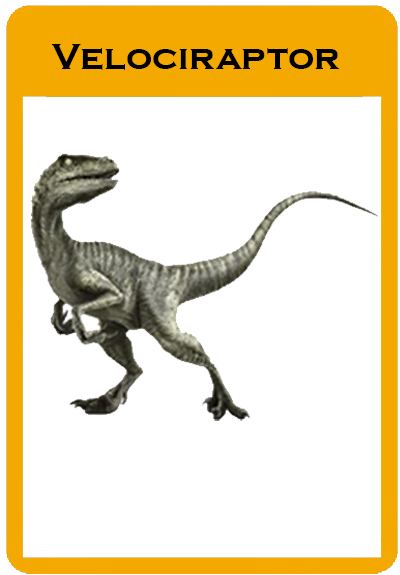
<style>
.page{position:relative;width:400px;height:575px;background:#ffffff}
.page>*{position:absolute;margin:0}
.t1{font:37.3px "CopperplateGothic-Bold";color:#000000}
</style>
<div class="page">
<p class="t1" style="left:51px;top:44px;width:288px;height:26px">Velociraptor</p>
</div>
